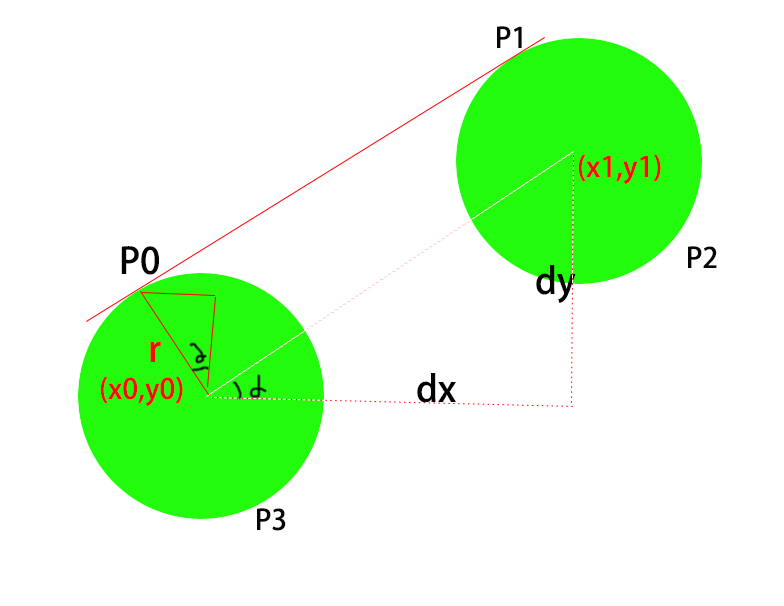
<style>
.page{position:relative;width:784px;height:606px;background:#ffffff}
.page>*{position:absolute;margin:0}
.t1{font:28px "AdobeHeitiStd-Regular";color:#060606}
.t2{font:28px "AdobeHeitiStd-Regular";color:#f90a0a}
.t3{font:36px "AdobeHeitiStd-Regular";color:#030303}
.t4{font:36px "AdobeHeitiStd-Regular";color:#f90a0a}
</style>
<div class="page">
<p class="t1" style="left:497px;top:26px;width:25px;height:22px">P1</p>
<p class="t2" style="left:578px;top:154px;width:83px;height:30px">(x1,y1)</p>
<p class="t3" style="left:121px;top:246px;width:38px;height:29px">P0</p>
<p class="t1" style="left:688px;top:246px;width:29px;height:22px">P2</p>
<p class="t3" style="left:536px;top:265px;width:40px;height:38px">dy</p>
<p class="t4" style="left:150px;top:341px;width:11px;height:21px">r</p>
<p class="t2" style="left:100px;top:376px;width:83px;height:30px">(x0,y0)</p>
<p class="t3" style="left:417px;top:373px;width:39px;height:30px">dx</p>
<p class="t1" style="left:257px;top:508px;width:29px;height:23px">P3</p>
</div>
